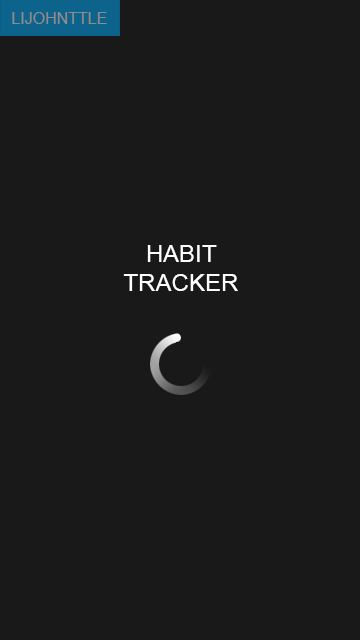
<style>
.page{position:relative;width:360px;height:640px;background:#191919}
.page>*{position:absolute;margin:0}
.t1{font:16px "ArialMT";color:#8c8c8c}
.t2{font:24px "ArialMT";color:#ffffff}
</style>
<div class="page">
<p class="t1" style="left:12px;top:12px;width:95px;height:12px">LIJOHNTTLE</p>
<p class="t2" style="left:123px;top:245px;width:115px;height:46px;text-align:center">HABIT<br>TRACKER</p>
</div>
